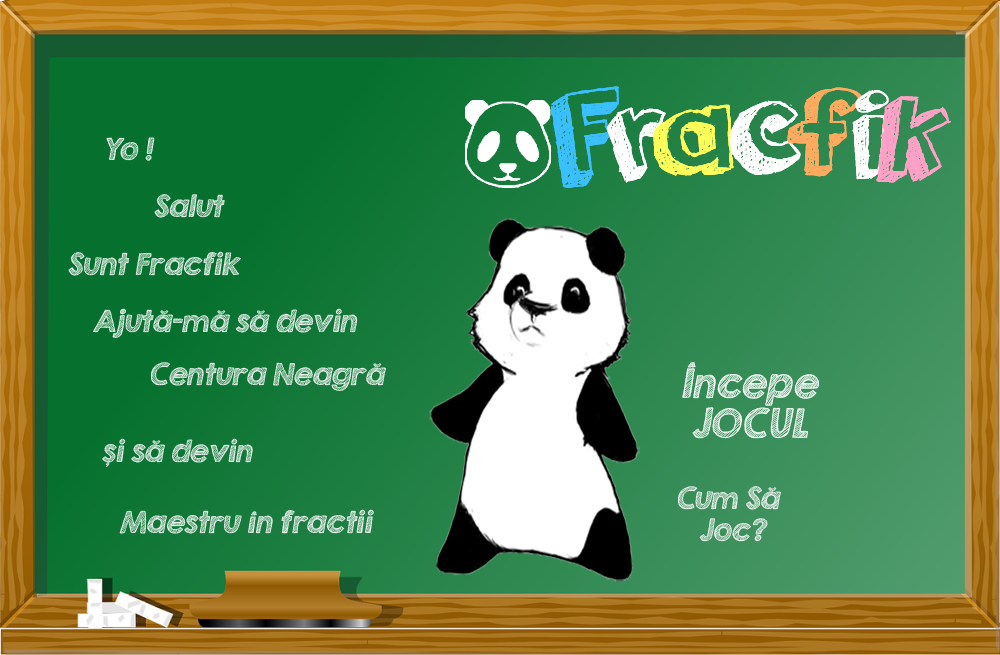
<style>
.page{position:relative;width:1000px;height:655px}
.page>*{position:absolute;margin:0}
.t1{font:133.3px "orangejuice";color:#3ac0ff}
.t2{font:133.3px "orangejuice";color:#ffffff}
.t3{font:133.3px "orangejuice";color:#fefe5a}
.t4{font:133.3px "orangejuice";color:#ffaa5f}
.t5{font:133.3px "orangejuice";color:#ffa1c7}
.t6{font:26.7px "KGSecondChancesSketch";color:#ffffff;font-style:italic}
.t7{font:26.7px/32px "KGSecondChancesSketch";color:#ffffff;font-style:italic}
</style>
<div class="page">
<p class="t1" style="left:551px;top:86px;width:400px;height:102px">F<span class="t2">r</span><span class="t3">a</span><span class="t2">c</span><span class="t4">f</span><span class="t2">i</span><span class="t5">k</span></p>
<p class="t1" style="left:551px;top:86px;width:400px;height:102px">F<span class="t2">r</span><span class="t3">a</span><span class="t2">c</span><span class="t4">f</span><span class="t2">i</span><span class="t5">k</span></p>
<p class="t6" style="left:106px;top:137px;width:49px;height:24px">Yo !</p>
<p class="t6" style="left:154px;top:194px;width:71px;height:24px">Salut</p>
<p class="t6" style="left:68px;top:251px;width:173px;height:25px">Sunt Fracfik</p>
<p class="t6" style="left:92px;top:308px;width:266px;height:30px">Ajută-mă să devin</p>
<p class="t6" style="left:151px;top:362px;width:235px;height:29px">Centura Neagră</p>
<p class="t6" style="left:102px;top:438px;width:151px;height:29px">și să devin</p>
<p class="t7" style="left:678px;top:486px;width:103px;height:56px">Cum Să <br>   Joc?</p>
<p class="t6" style="left:119px;top:509px;width:255px;height:25px">Maestru în fractii</p>
</div>
